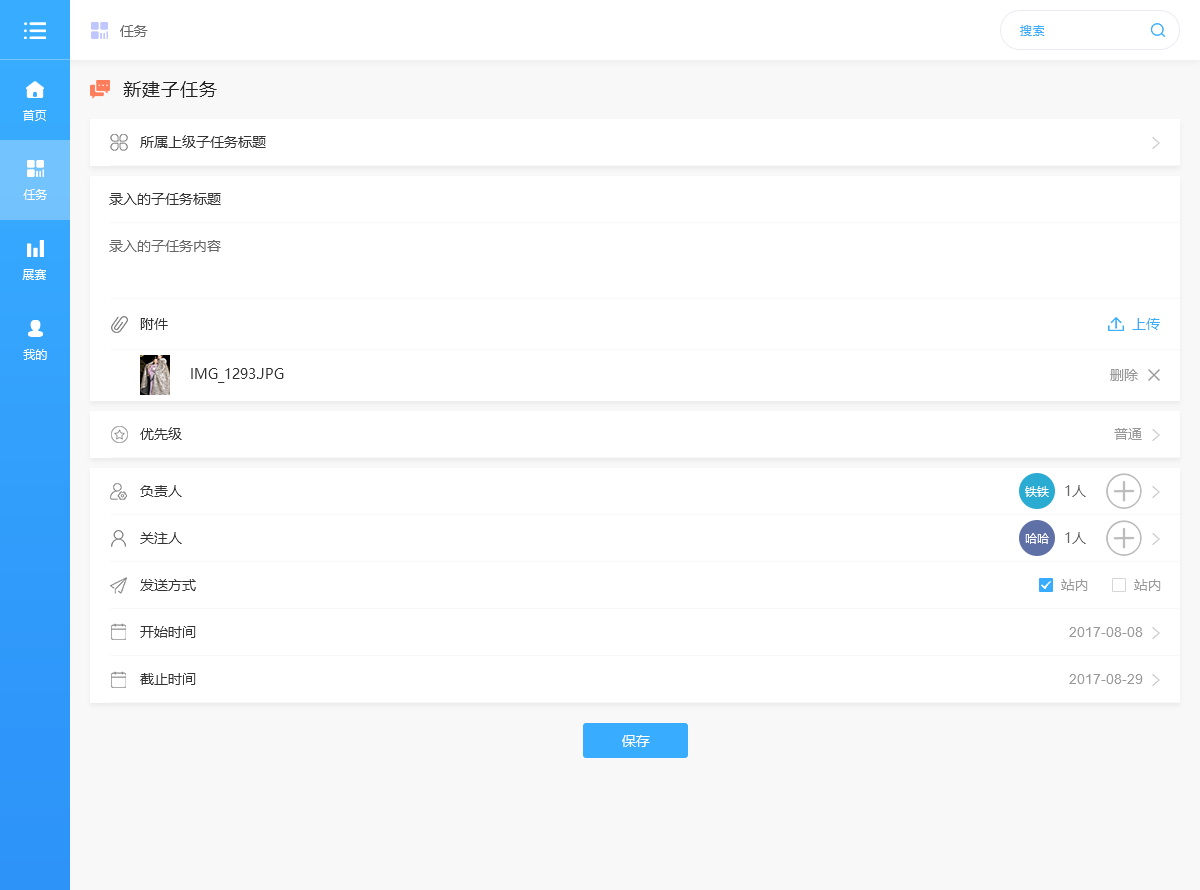
<style>
.page{position:relative;width:1200px;height:890px;background:#ffffff}
.page>*{position:absolute;margin:0}
.t1{font:14px "MicrosoftYaHei";color:#666666}
.t2{font:12px "MicrosoftYaHei";letter-spacing:0.05em;color:#38adff}
.t3{font:18px "MicrosoftYaHei";letter-spacing:0.05em;color:#222222}
.t4{font:12px "MicrosoftYaHei";color:#ffffff}
.t5{font:14px "MicrosoftYaHei";color:#333333}
.t6{font:14px "MicrosoftYaHei";color:#38adff}
.t7{font:14px "MicrosoftYaHei";color:#999999}
.t8{font:14px "ArialMT";color:#999999}
.t9{font:14px "MicrosoftYaHei";color:#ffffff}
</style>
<div class="page">
<p class="t1" style="left:120px;top:25px;width:28px;height:12px">任务</p>
<p class="t2" style="left:1020px;top:25px;width:25px;height:11px">搜索</p>
<p class="t3" style="left:123px;top:81px;width:94px;height:17px">新建子任务</p>
<p class="t4" style="left:23px;top:110px;width:24px;height:11px">首页</p>
<p class="t5" style="left:140px;top:135px;width:126px;height:13px">所属上级子任务标题</p>
<p class="t4" style="left:23px;top:189px;width:24px;height:11px">任务</p>
<p class="t5" style="left:109px;top:193px;width:112px;height:12px">录入的子任务标题</p>
<p class="t1" style="left:109px;top:240px;width:112px;height:12px">录入的子任务内容</p>
<p class="t4" style="left:22px;top:269px;width:24px;height:11px">展赛</p>
<p class="t5" style="left:140px;top:318px;width:28px;height:12px">附件</p>
<p class="t6" style="left:1132px;top:318px;width:28px;height:12px">上传</p>
<p class="t4" style="left:23px;top:349px;width:24px;height:11px">我的</p>
<p class="t5" style="left:191px;top:368px;width:93px;height:15px">IMG_1293.JPG</p>
<p class="t7" style="left:1110px;top:369px;width:28px;height:12px">删除</p>
<p class="t5" style="left:140px;top:427px;width:42px;height:13px">优先级</p>
<p class="t7" style="left:1114px;top:428px;width:28px;height:12px">普通</p>
<p class="t5" style="left:140px;top:485px;width:42px;height:12px">负责人</p>
<p class="t4" style="left:1025px;top:486px;width:24px;height:11px">铁铁</p>
<p class="t1" style="left:1065px;top:485px;width:21px;height:12px">1人</p>
<p class="t5" style="left:140px;top:532px;width:42px;height:12px">关注人</p>
<p class="t4" style="left:1025px;top:533px;width:24px;height:11px">哈哈</p>
<p class="t1" style="left:1065px;top:532px;width:21px;height:12px">1人</p>
<p class="t5" style="left:140px;top:579px;width:56px;height:12px">发送方式</p>
<p class="t7" style="left:1061px;top:579px;width:27px;height:12px">站内</p>
<p class="t7" style="left:1134px;top:579px;width:27px;height:12px">站内</p>
<p class="t5" style="left:140px;top:626px;width:56px;height:12px">开始时间</p>
<p class="t8" style="left:1069px;top:627px;width:74px;height:10px">2017-08-08</p>
<p class="t5" style="left:140px;top:673px;width:56px;height:12px">截止时间</p>
<p class="t8" style="left:1069px;top:674px;width:74px;height:10px">2017-08-29</p>
<p class="t9" style="left:622px;top:735px;width:28px;height:12px">保存</p>
</div>
